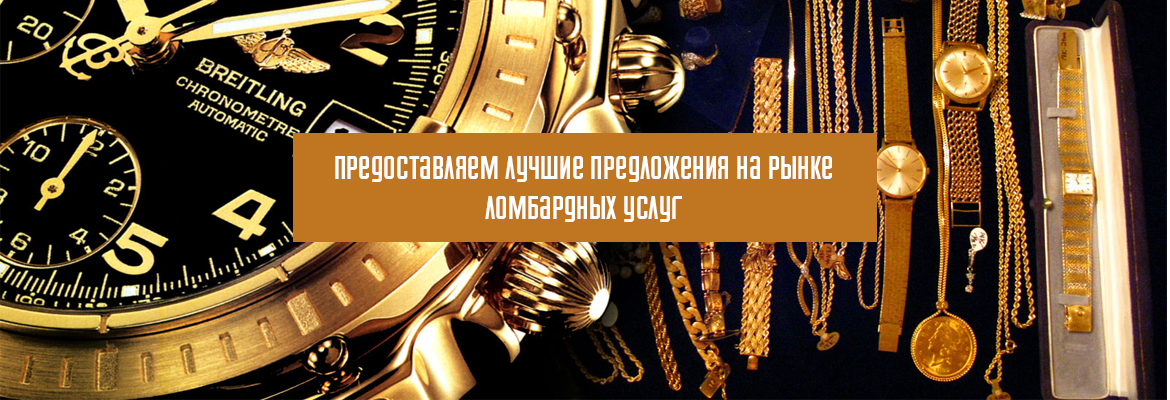
<style>
.page{position:relative;width:1170px;height:400px}
.page>*{position:absolute;margin:0}
.t1{font:33.3px "Airport";color:#fffefe}
</style>
<div class="page">
<p class="t1" style="left:335px;top:156px;width:497px;height:66px;text-align:center">предоставляем лучшие предложения на рынке ломбардных услуг</p>
</div>
